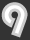
<style>
.page{position:relative;width:30px;height:40px;background:#333333}
.page>*{position:absolute;margin:0}
.t1{font:50px "Bauhaus93";letter-spacing:0.2em}
</style>
<div class="page">
<p class="t1" style="left:1px;top:2px;width:27px;height:36px">9</p>
</div>
